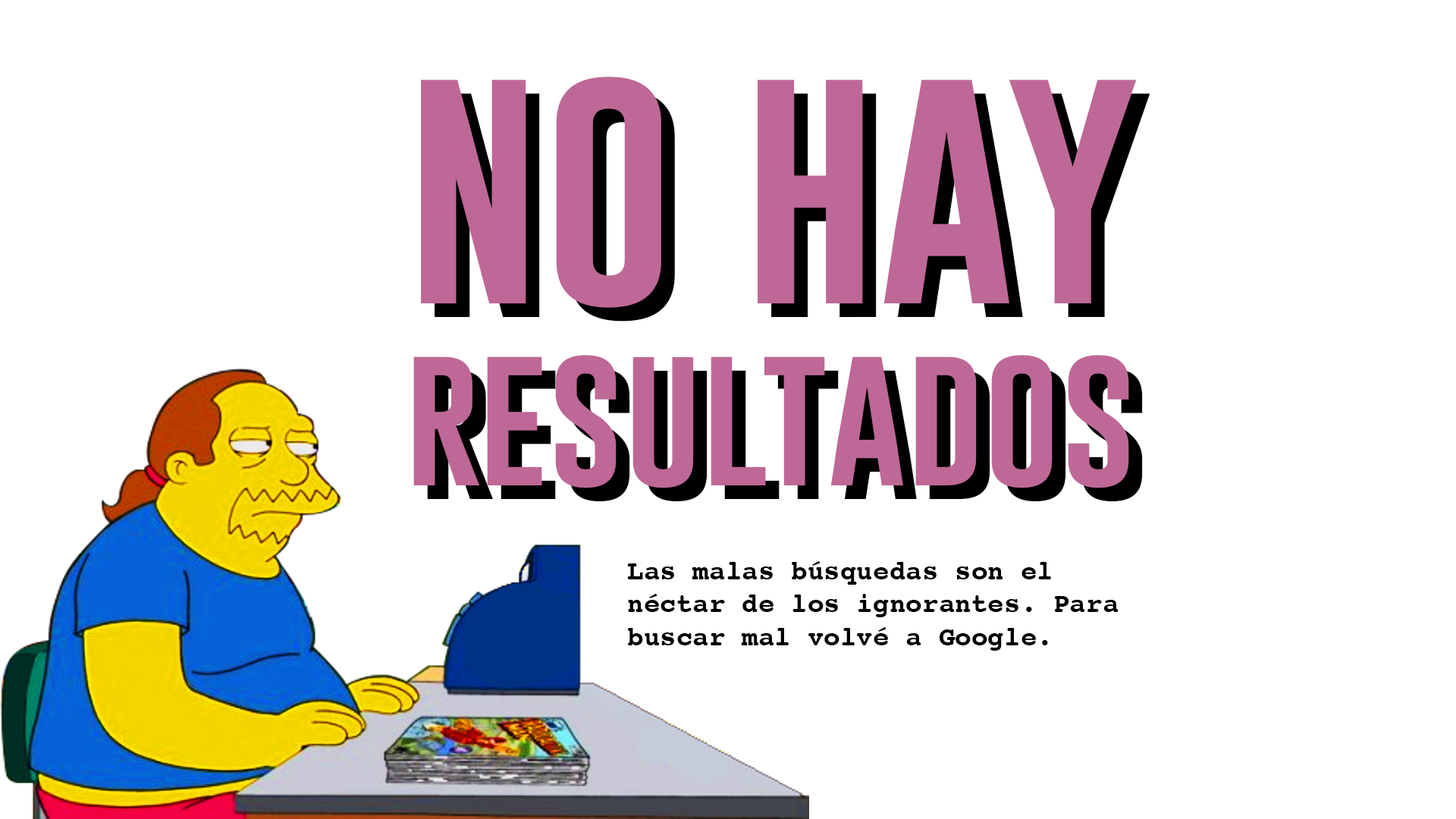
<style>
.page{position:relative;width:1456px;height:819px;background:#ffffff}
.page>*{position:absolute;margin:0}
.t1{font:151.7px "Gobold";color:#be6897}
.t2{font:263.9px "Gobold";color:#be6897}
.t3{font:151.7px "Gobold"}
.t4{font:263.9px "Gobold"}
.t5{font:27.3px "Courier-Bold";color:#000000}
</style>
<div class="page">
<p class="t1" style="left:413px;top:77px;width:724px;height:411px"><span class="t2">no hay<br></span>resultados</p>
<p class="t3" style="left:427px;top:90px;width:723px;height:412px"><span class="t4">no hay<br></span>resultados</p>
<p class="t5" style="left:627px;top:561px;width:492px;height:90px">Las malas búsquedas son el néctar de los ignorantes. Para buscar mal volvé a Google.</p>
</div>
